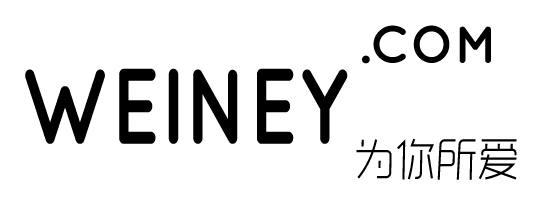
<style>
.page{position:relative;width:536px;height:210px;background:#ffffff}
.page>*{position:absolute;margin:0}
.t1{font:52.1px "TypoPRO-Quicksand-Bold";color:#000000}
.t2{font:107px "TypoPRO-Quicksand-Bold";color:#000000;scale:0.77 1}
.t3{font:44.7px "RTWSYueGoTrial-Light";color:#000000;scale:0.93 1}
</style>
<div class="page">
<p class="t1" style="left:362px;top:25px;width:129px;height:39px">.COM</p>
<p class="t2" style="left:25px;top:68px;width:323px;height:76px">WEINEY</p>
<p class="t3" style="left:356px;top:138px;width:161px;height:42px">为你所爱</p>
</div>
